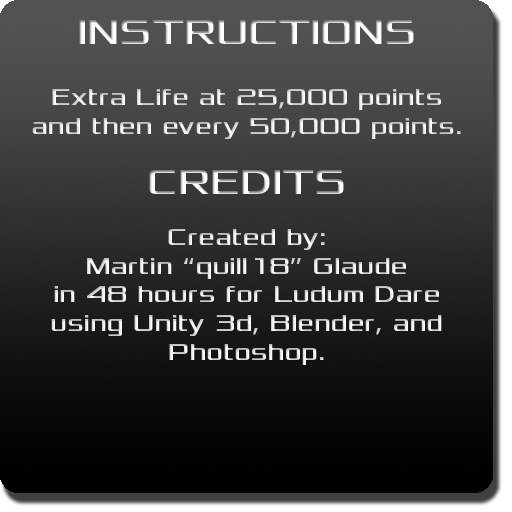
<style>
.page{position:relative;width:512px;height:512px}
.page>*{position:absolute;margin:0}
.t1{font:36px "Xolonium"}
.t2{font:24px "Xolonium"}
</style>
<div class="page">
<p class="t1" style="left:79px;top:20px;width:335px;height:24px">INSTRUCTIONS</p>
<p class="t2" style="left:32px;top:89px;width:429px;height:50px;text-align:center">Extra Life at 25,000 points<br>and then every 50,000 points.</p>
<p class="t1" style="left:149px;top:170px;width:195px;height:24px">CREDITS</p>
<p class="t2" style="left:51px;top:229px;width:391px;height:136px;text-align:center">Created by:<br>Martin “quill18” Glaude<br>in 48 hours for Ludum Dare<br>using Unity 3d, Blender, and Photoshop.</p>
</div>
